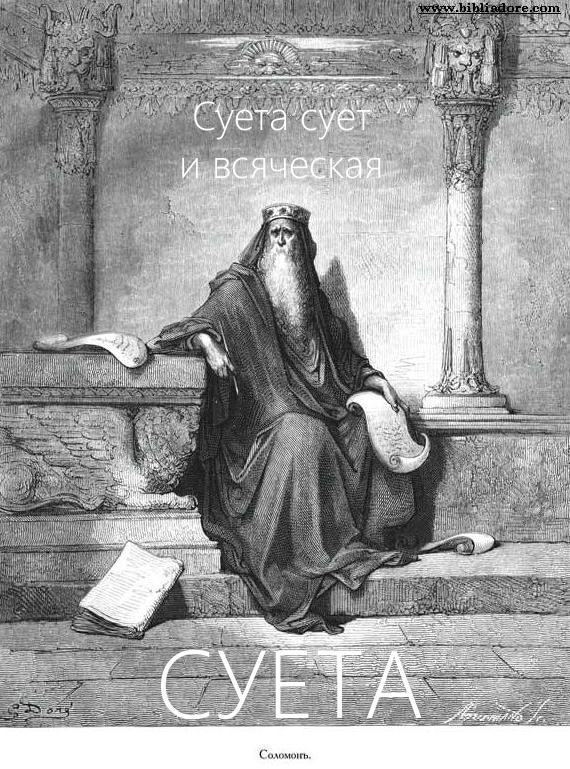
<style>
.page{position:relative;width:570px;height:769px}
.page>*{position:absolute;margin:0}
.t1{font:40px "SegoeUI-Light";color:#ffffff}
.t2{font:96px "SegoeUI-Light";color:#ffffff}
</style>
<div class="page">
<p class="t1" style="left:182px;top:101px;width:199px;height:78px;text-align:center">Суета сует<br>и всяческая</p>
<p class="t2" style="left:161px;top:649px;width:261px;height:71px">СУЕТА</p>
</div>
